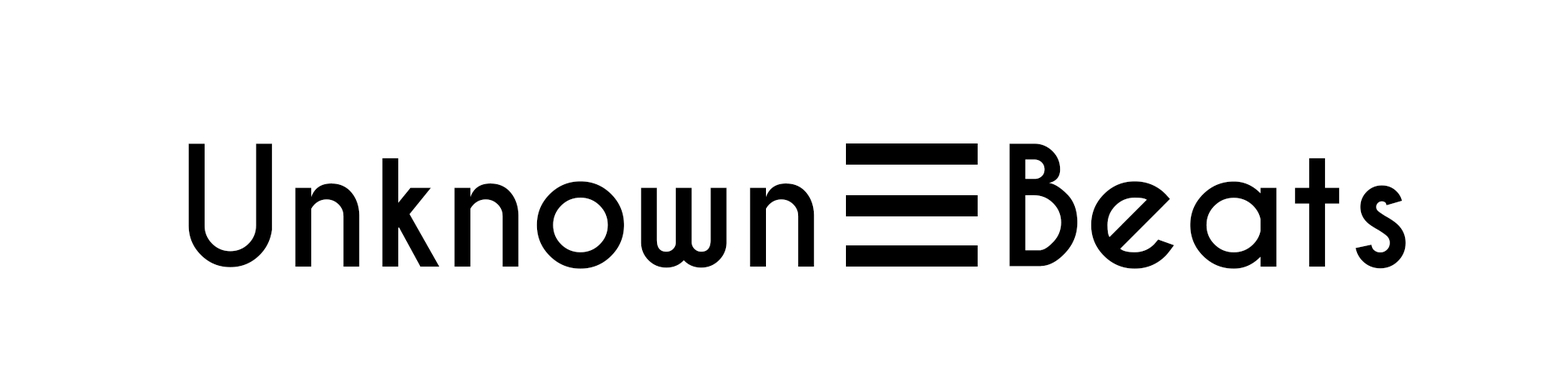
<style>
.page{position:relative;width:1568px;height:392px;background:#ffffff}
.page>*{position:absolute;margin:0}
.t1{font:156.8px "CaviarDreams-Bold";color:#000000}
</style>
<div class="page">
<p class="t1" style="left:188px;top:143px;width:627px;height:126px">Unknown</p>
<p class="t1" style="left:1009px;top:143px;width:397px;height:126px">Beats</p>
</div>
